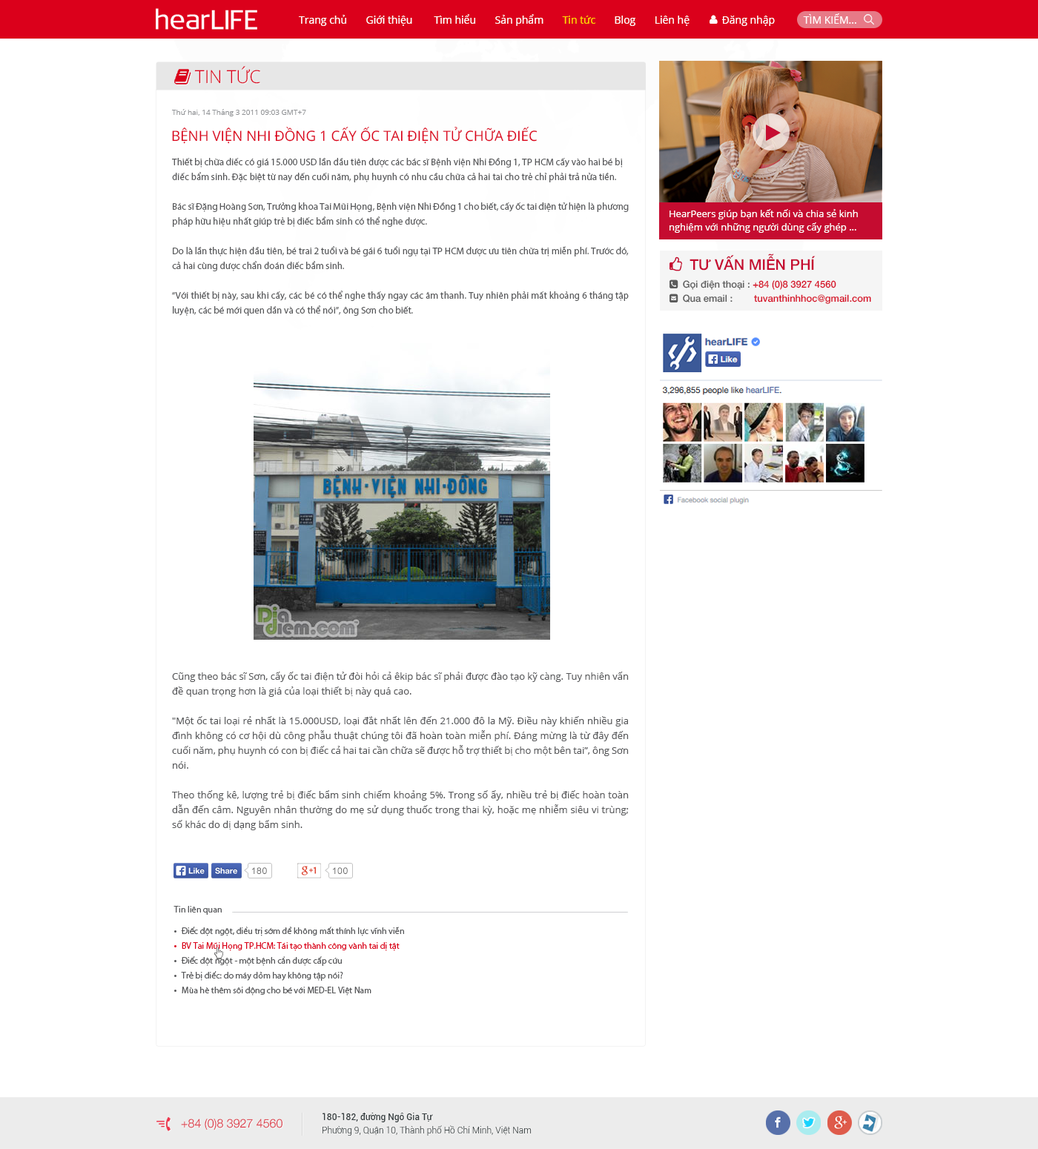
<style>
.page{position:relative;width:1038px;height:1149px;background:#ffffff}
.page>*{position:absolute;margin:0}
.t1{font:10.4px "OpenSans";color:#ffffff}
.t2{font:10.4px "OpenSans";color:#ffd800}
.t3{font:7.4px "OpenSans";color:#939598}
.t4{font:14.1px "OpenSans";color:#db001b;text-transform:uppercase}
.t5{font:9.6px/14.8px "MyriadPro-Regular";color:#58595b}
.t6{font:9.6px/13.3px "OpenSans";color:#ffffff}
.t7{font:9.6px/14.8px "OpenSans";color:#58595b}
.t8{font:8.9px "ArialMT";letter-spacing:0.06em;color:#636363}
.t9{font:8.9px "MyriadPro-Regular";color:#58595b}
.t10{font:8.9px/14.8px "MyriadPro-Regular";color:#58595b}
.t11{font:8.9px/14.8px "MyriadPro-Regular";color:#db001b}
.t12{font:11.9px "HelveticaNeue-Light";color:#dd2f3f}
.t13{font:8.9px/13.3px "Roboto-Light";color:#373f41}
.t14{font:8.9px/13.3px "Roboto-Medium";color:#373f41}
</style>
<div class="page">
<p class="t1" style="left:299px;top:13px;width:557px;height:13px">Trang chủ       Giới thiệu        Tìm hiểu       Sản phẩm       <span class="t2">Tin tức</span>       Blog       Liên hệ            Đăng nhập           TÌM KIẾM...</p>
<p class="t3" style="left:172px;top:109px;width:134px;height:7px">Thứ hai, 14 Tháng 3 2011 09:03 GMT+7</p>
<p class="t4" style="left:172px;top:127px;width:365px;height:17px">Bệnh viện Nhi Đồng 1 cấy ốc tai điện tử chữa điếc</p>
<p class="t5" style="left:172px;top:158px;width:457px;height:158px">Thiết bị chữa điếc có giá 15.000 USD lần đầu tiên được các bác sĩ Bệnh viện Nhi Đồng 1, TP HCM cấy vào hai bé bị điếc bẩm sinh. Đặc biệt từ nay đến cuối năm, phụ huynh có nhu cầu chữa cả hai tai cho trẻ chỉ phải trả nửa tiền. <br><br>Bác sĩ Đặng Hoàng Sơn, Trưởng khoa Tai Mũi Họng, Bệnh viện Nhi Đồng 1 cho biết, cấy ốc tai điện tử hiện là phương pháp hữu hiệu nhất giúp trẻ bị điếc bẩm sinh có thể nghe được.<br><br>Do là lần thực hiện đầu tiên, bé trai 2 tuổi và bé gái 6 tuổi ngụ tại TP HCM được ưu tiên chữa trị miễn phí. Trước đó, cả hai cùng được chẩn đoán điếc bẩm sinh.<br><br>“Với thiết bị này, sau khi cấy, các bé có thể nghe thấy ngay các âm thanh. Tuy nhiên phải mất khoảng 6 tháng tập luyện, các bé mới quen dần và có thể nói”, ông Sơn cho biết.</p>
<p class="t6" style="left:669px;top:209px;width:189px;height:24px">HearPeers giúp bạn kết nối và chia sẻ kinh nghiệm với những người dùng cấy ghép ...</p>
<p class="t7" style="left:172px;top:672px;width:457px;height:158px;text-align:justify">Cũng theo bác sĩ Sơn, cấy ốc tai điện tử đòi hỏi cả êkip bác sĩ phải được đào tạo kỹ càng. Tuy nhiên vấn đề quan trọng hơn là giá của loại thiết bị này quá cao.<br><br>"Một ốc tai loại rẻ nhất là 15.000USD, loại đắt nhất lên đến 21.000 đô la Mỹ. Điều này khiến nhiều gia đình không có cơ hội dù công phẫu thuật chúng tôi đã hoàn toàn miễn phí. Đáng mừng là từ đây đến cuối năm, phụ huynh có con bị điếc cả hai tai cần chữa sẽ được hỗ trợ thiết bị cho một bên tai”, ông Sơn nói.<br><br>Theo thống kê, lượng trẻ bị điếc bẩm sinh chiếm khoảng 5%. Trong số ấy, nhiều trẻ bị điếc hoàn toàn dẫn đến câm. Nguyên nhân thường do mẹ sử dụng thuốc trong thai kỳ, hoặc mẹ nhiễm siêu vi trùng; số khác do dị dạng bẩm sinh.</p>
<p class="t8" style="left:252px;top:867px;width:15px;height:7px">180</p>
<p class="t8" style="left:333px;top:867px;width:15px;height:7px">100</p>
<p class="t9" style="left:173px;top:906px;width:49px;height:9px">Tin liên quan</p>
<p class="t10" style="left:181px;top:927px;width:223px;height:69px">Điếc đột ngột, điều trị sớm để không mất thính lực vĩnh viễn<br><span class="t11">BV Tai Mũi Họng TP.HCM: Tái tạo thành công vành tai dị tật <br></span>Điếc đột ngột - một bệnh cần được cấp cứu<br>Trẻ bị điếc: do máy dỏm hay không tập nói?<br>Mùa hè thêm sôi động cho bé với MED-EL Việt Nam</p>
<p class="t12" style="left:181px;top:1119px;width:101px;height:11px">+84 (0)8 3927 4560</p>
<p class="t13" style="left:322px;top:1113px;width:210px;height:23px"><span class="t14">180-182, đường Ngô Gia Tự<br></span>Phường 9, Quận 10, Thành phố Hồ Chí Minh, Việt Nam</p>
</div>
